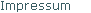
<style>
.page{position:relative;width:91px;height:13px;background:#ffffff}
.page>*{position:absolute;margin:0}
.t1{font:12px "Verdana";letter-spacing:0.012em;color:#385c62}
</style>
<div class="page">
<p class="t1" style="left:1px;top:1px;width:69px;height:11px">Impressum</p>
</div>
